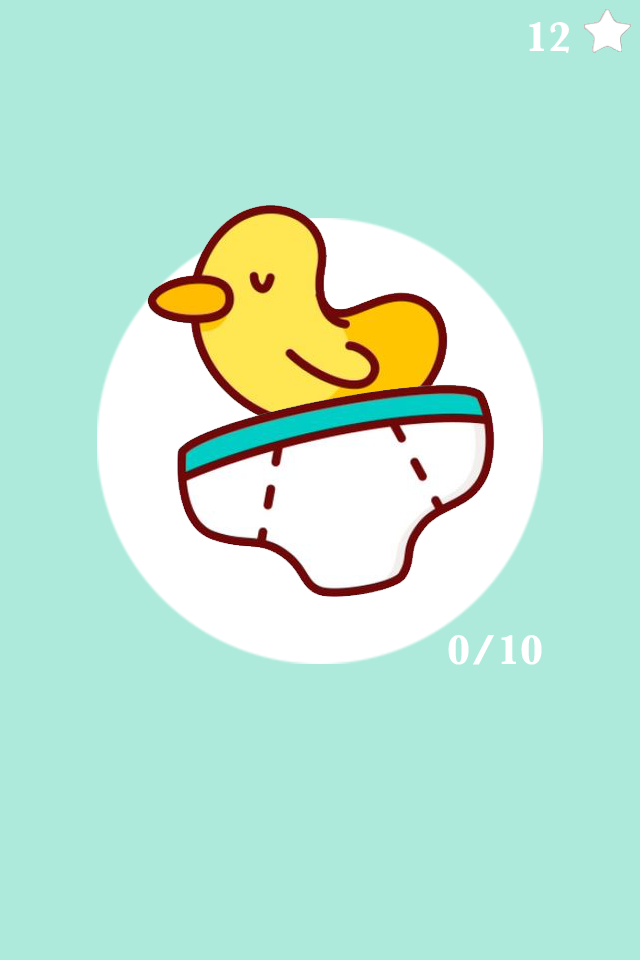
<style>
.page{position:relative;width:640px;height:960px;background:#adeadb}
.page>*{position:absolute;margin:0}
.t1{font:43px "Baskerville-Bold";color:#ffffff;text-transform:uppercase}
</style>
<div class="page">
<p class="t1" style="left:529px;top:22px;width:41px;height:31px">12</p>
<p class="t1" style="left:448px;top:635px;width:94px;height:30px">0/10</p>
</div>
